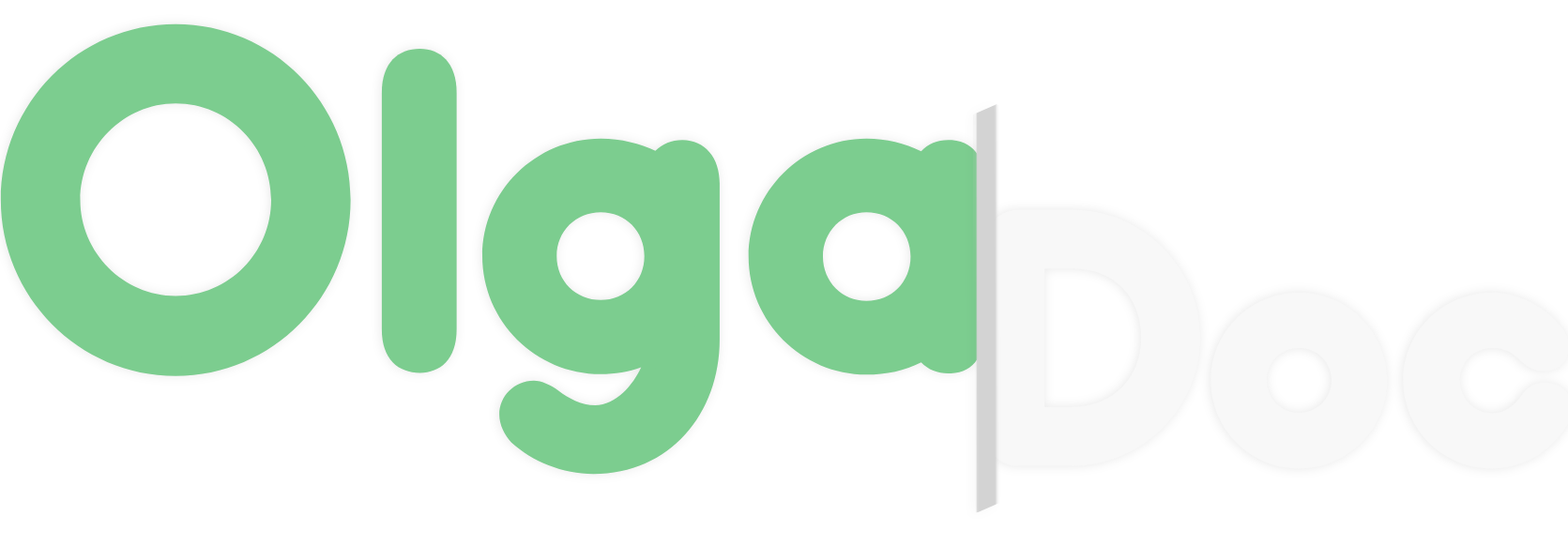
<style>
.page{position:relative;width:1568px;height:546px;background:#ffffff}
.page>*{position:absolute;margin:0}
.t1{font:457.6px "HirukoPro-Black";color:#7ccd8f}
</style>
<div class="page">
<p class="t1" style="left:0px;top:23px;width:986px;height:452px">Olga</p>
</div>
